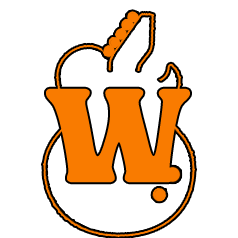
<style>
.page{position:relative;width:238px;height:238px;background:#ffffff}
.page>*{position:absolute;margin:0}
.t1{font:131.1px "ShineCoasty";letter-spacing:-0.02em;color:#f97b00}
</style>
<div class="page">
<p class="t1" style="left:46px;top:88px;width:144px;height:95px">W</p>
</div>
